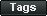
<style>
.page{position:relative;width:47px;height:16px}
.page>*{position:absolute;margin:0}
.t1{font:11px "Arial-BoldMT";color:#ebebeb}
</style>
<div class="page">
<p class="t1" style="left:10px;top:3px;width:26px;height:10px">Tags</p>
</div>
